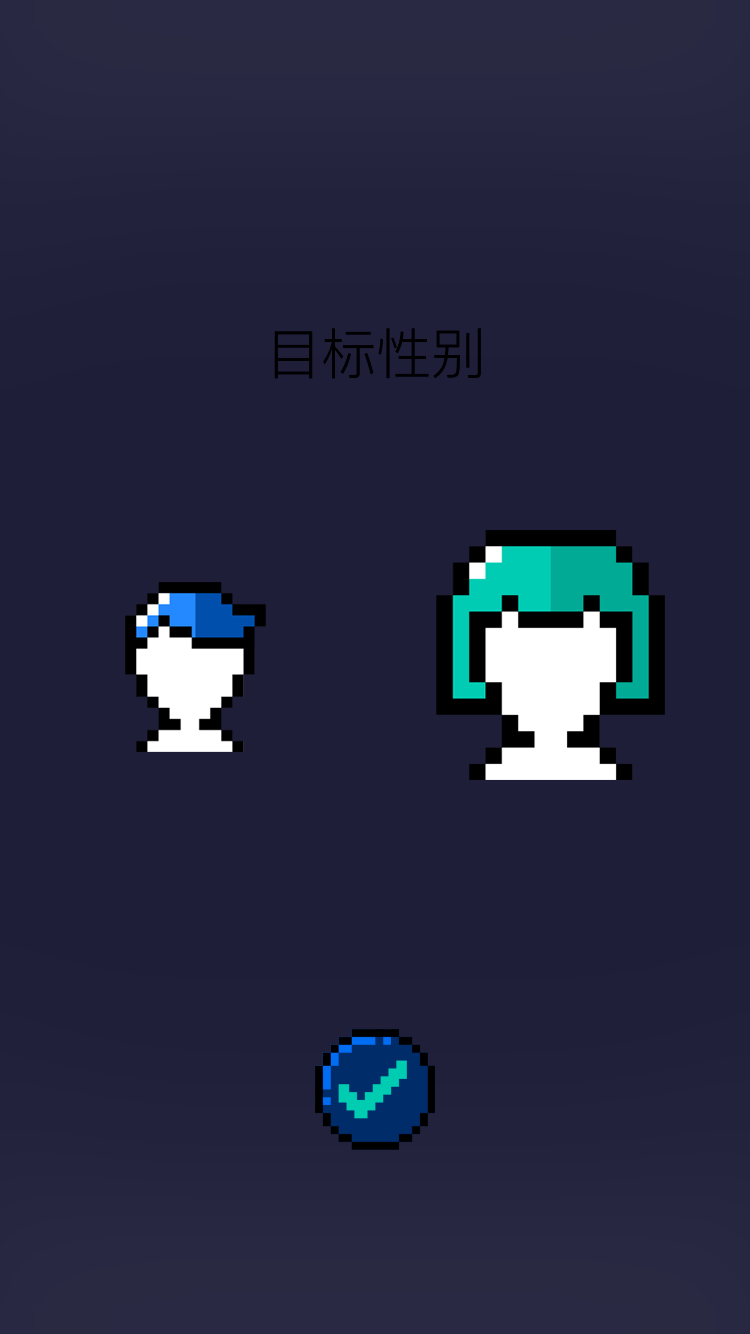
<style>
.page{position:relative;width:750px;height:1334px;background:#1e1e39}
.page>*{position:absolute;margin:0}
.t1{font:55px "PingFang-SC-Regular";color:#000000}
</style>
<div class="page">
<p class="t1" style="left:274px;top:328px;width:207px;height:51px">目标性别</p>
</div>
